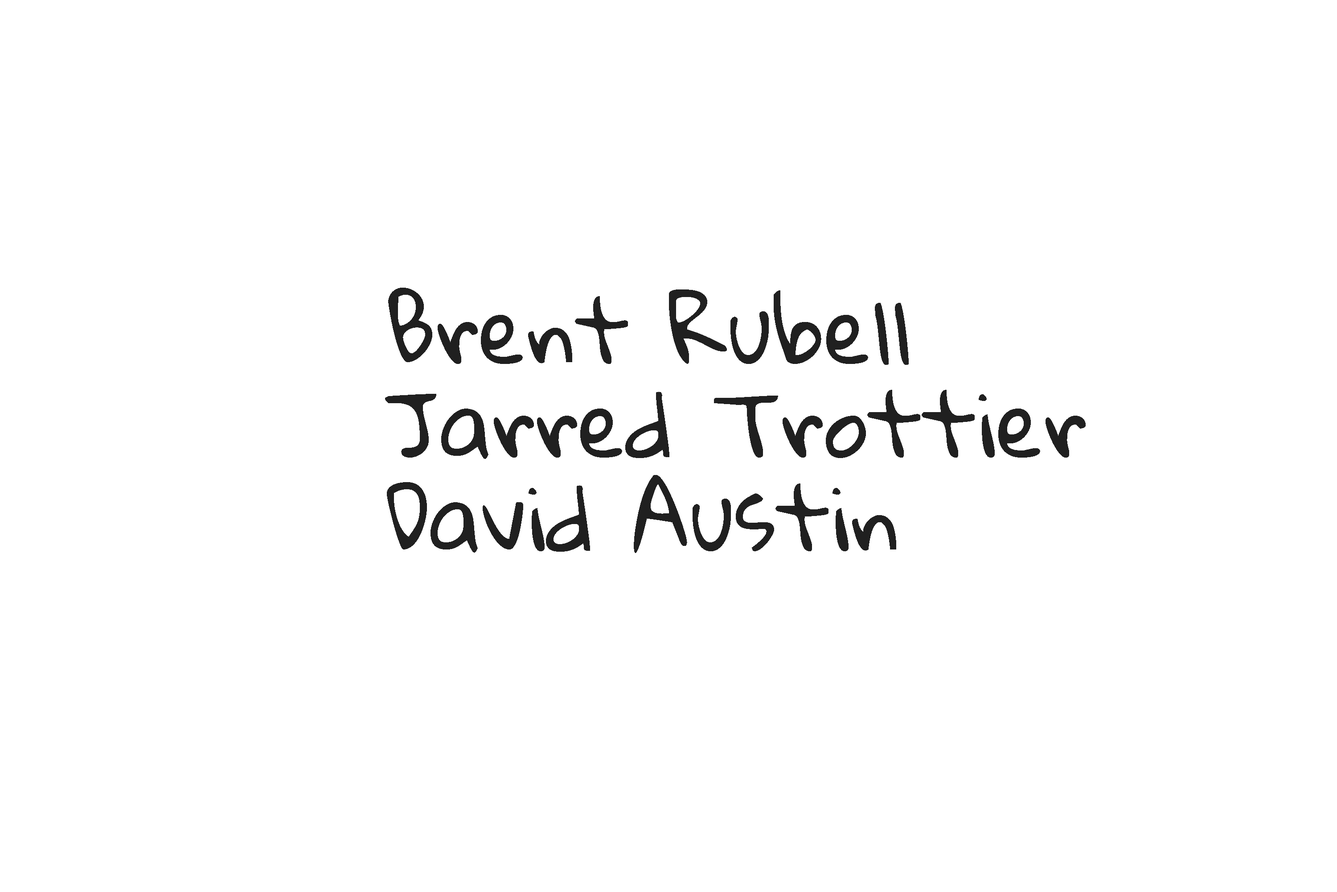
<style>
.page{position:relative;width:1337px;height:892px;background:#ffffff}
.page>*{position:absolute;margin:0}
.t1{font:78px "GloriaHallelujah";color:#202020}
</style>
<div class="page">
<p class="t1" style="left:385px;top:288px;width:701px;height:265px">Brent Rubell<br>Jarred Trottier<br>David Austin</p>
</div>
